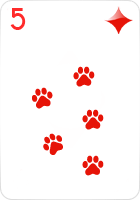
<style>
.page{position:relative;width:140px;height:200px;background:#ffffff}
.page>*{position:absolute;margin:0}
.t1{font:26px "CardCharacters";color:#ff2b2b}
</style>
<div class="page">
<p class="t1" style="left:10px;top:8px;width:16px;height:22px">5</p>
</div>
